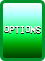
<style>
.page{position:relative;width:45px;height:61px}
.page>*{position:absolute;margin:0}
.t1{font:9px "VCROSDMono";color:#ffffff}
</style>
<div class="page">
<p class="t1" style="left:4px;top:26px;width:37px;height:7px">OPTIONS</p>
</div>
